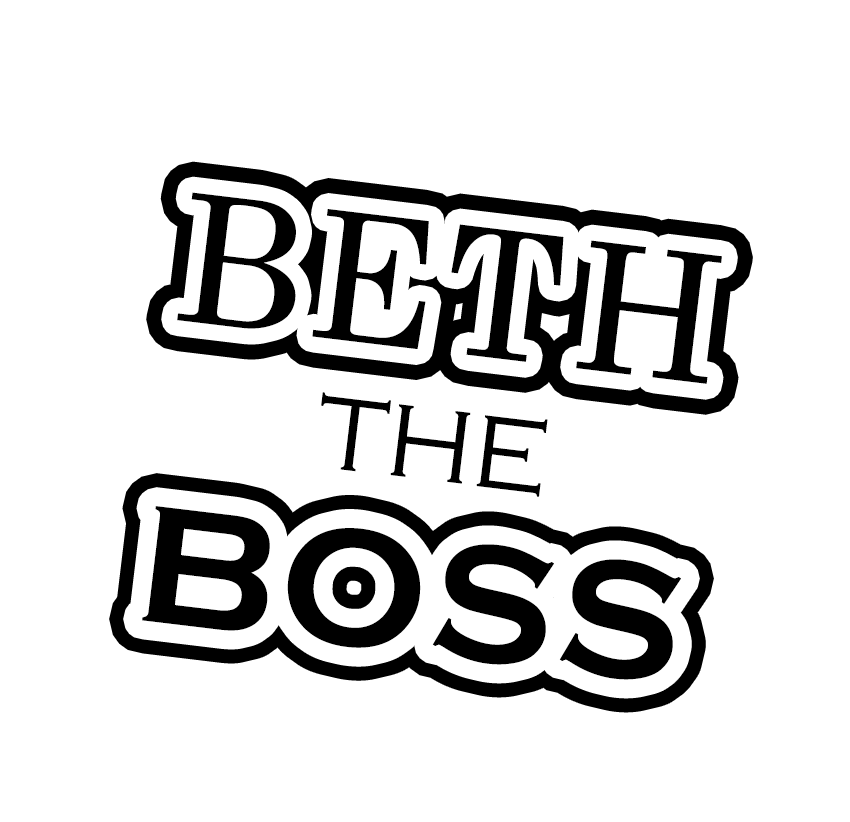
<style>
.page{position:relative;width:850px;height:822px;background:#ffffff}
.page>*{position:absolute;margin:0}
.t1{font:177.6px "Century";letter-spacing:0.025em;color:#000000}
.t2{font:177.6px "Century";letter-spacing:0.05em;color:#000000}
.t3{font:177.6px "Century";letter-spacing:0.075em;color:#000000}
.t4{font:177.6px "Century";color:#000000}
.t5{font:106.6px "CopperplateGothic-Light";color:#000000}
.t6{font:172.3px "CopperplateGothic-Bold";letter-spacing:0.025em;color:#000000}
</style>
<div class="page">
<p class="t1" style="left:177px;top:192px;width:545px;height:192px;rotate:7deg">B<span class="t2">E</span><span class="t3">T</span><span class="t4">H</span></p>
<p class="t5" style="left:321px;top:392px;width:227px;height:105px;rotate:7deg">THE</p>
<p class="t6" style="left:142px;top:506px;width:539px;height:174px;rotate:7deg">BOSS</p>
</div>
